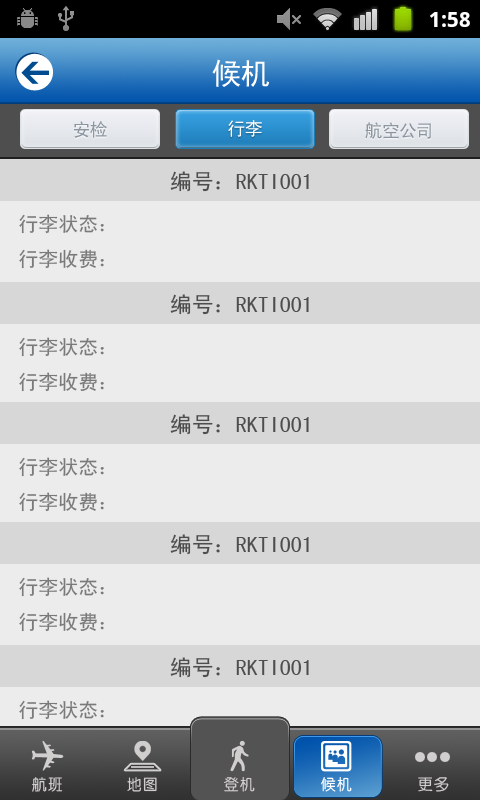
<style>
.page{position:relative;width:480px;height:800px;background:#ececec}
.page>*{position:absolute;margin:0}
.t1{font:30px "SimHei";color:#ffffff;text-transform:uppercase}
.t2{font:18px "SimHei";color:#8c96a0;text-transform:uppercase}
.t3{font:18px "SimHei";color:#ffffff;text-transform:uppercase}
.t4{font:22px "SimHei";color:#4e4e4e}
.t5{font:20px "SimHei";color:#7a7a7a}
.t6{font:16px "CTZhongYuanSJ";color:#d1cece}
.t7{font:16px "CTZhongYuanSJ";color:#fefefe}
</style>
<div class="page">
<p class="t1" style="left:212px;top:59px;width:57px;height:28px">候机</p>
<p class="t2" style="left:74px;top:121px;width:33px;height:17px">安检</p>
<p class="t3" style="left:228px;top:120px;width:34px;height:17px">行李</p>
<p class="t2" style="left:365px;top:122px;width:66px;height:17px">航空公司</p>
<p class="t4" style="left:170px;top:171px;width:139px;height:21px">编号：RKTI001</p>
<p class="t5" style="left:19px;top:214px;width:85px;height:55px">行李状态：<br>行李收费：</p>
<p class="t4" style="left:170px;top:294px;width:139px;height:21px">编号：RKTI001</p>
<p class="t5" style="left:19px;top:337px;width:85px;height:55px">行李状态：<br>行李收费：</p>
<p class="t4" style="left:170px;top:414px;width:139px;height:21px">编号：RKTI001</p>
<p class="t5" style="left:19px;top:457px;width:85px;height:55px">行李状态：<br>行李收费：</p>
<p class="t4" style="left:170px;top:534px;width:139px;height:21px">编号：RKTI001</p>
<p class="t5" style="left:19px;top:577px;width:85px;height:55px">行李状态：<br>行李收费：</p>
<p class="t4" style="left:170px;top:657px;width:139px;height:21px">编号：RKTI001</p>
<p class="t5" style="left:19px;top:700px;width:85px;height:20px">行李状态：</p>
<p class="t6" style="left:32px;top:777px;width:31px;height:15px">航班</p>
<p class="t6" style="left:127px;top:777px;width:30px;height:15px">地图</p>
<p class="t6" style="left:224px;top:777px;width:31px;height:15px">登机</p>
<p class="t7" style="left:321px;top:777px;width:31px;height:15px">候机</p>
<p class="t6" style="left:418px;top:777px;width:31px;height:15px">更多</p>
</div>
